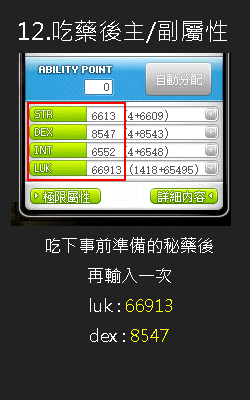
<style>
.page{position:relative;width:250px;height:400px;background:#222222}
.page>*{position:absolute;margin:0}
.t1{font:24px "MicrosoftJhengHeiRegular";color:#ffffff}
.t2{font:17px/15px "MicrosoftJhengHeiRegular";color:#ffffff}
.t3{font:17px/15px "MicrosoftJhengHeiRegular";color:#ffff00}
</style>
<div class="page">
<p class="t1" style="left:19px;top:20px;width:208px;height:23px">12.吃藥後主/副屬性</p>
<p class="t2" style="left:46px;top:237px;width:167px;height:105px;text-align:center">吃下事前準備的秘藥後<br><br>再輸入一次<br><br> luk : <span class="t3">66913<br><br></span>dex : <span class="t3">8547</span></p>
</div>
